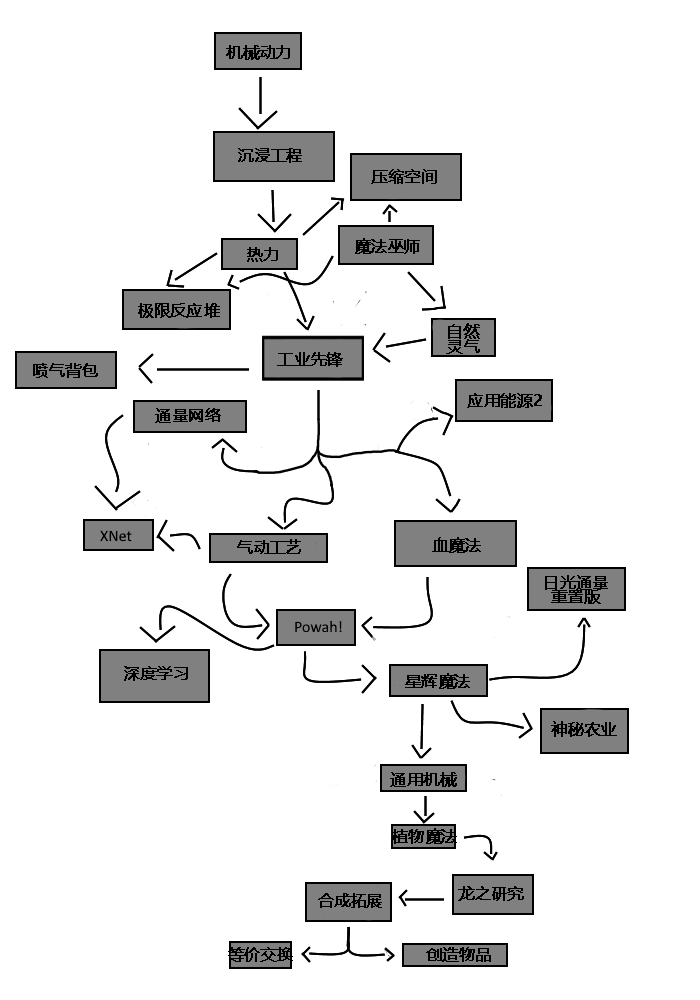
<style>
.page{position:relative;width:700px;height:1000px;background:#ffffff}
.page>*{position:absolute;margin:0}
.t1{font:16px "MicrosoftYaHei";color:#000000;font-weight:bold}
.t2{font:12px "MicrosoftYaHei";color:#000000;font-weight:bold}
.t3{font:12px/14.7px "MicrosoftYaHei";color:#000000;font-weight:bold}
</style>
<div class="page">
<p class="t1" style="left:226px;top:45px;width:64px;height:15px">机械动力</p>
<p class="t2" style="left:238px;top:148px;width:64px;height:15px">沉浸工程</p>
<p class="t2" style="left:371px;top:169px;width:66px;height:15px">压缩空间</p>
<p class="t2" style="left:355px;top:238px;width:65px;height:16px">魔法巫师</p>
<p class="t2" style="left:247px;top:247px;width:31px;height:15px">热力</p>
<p class="t2" style="left:138px;top:303px;width:82px;height:15px">极限反应堆</p>
<p class="t3" style="left:446px;top:323px;width:34px;height:31px;text-align:center">自然<br>灵气</p>
<p class="t2" style="left:277px;top:352px;width:66px;height:15px">工业先锋</p>
<p class="t2" style="left:33px;top:363px;width:65px;height:15px">喷气背包</p>
<p class="t2" style="left:467px;top:393px;width:75px;height:15px">应用能源2</p>
<p class="t2" style="left:155px;top:408px;width:66px;height:15px">通量网络</p>
<p class="t2" style="left:237px;top:539px;width:64px;height:15px">气动工艺</p>
<p class="t2" style="left:432px;top:537px;width:49px;height:16px">血魔法</p>
<p class="t3" style="left:545px;top:575px;width:63px;height:29px;text-align:center">日光通量<br>重置版</p>
<p class="t2" style="left:124px;top:666px;width:64px;height:15px">深度学习</p>
<p class="t2" style="left:405px;top:673px;width:65px;height:16px">星辉魔法</p>
<p class="t2" style="left:551px;top:721px;width:66px;height:16px">神秘农业</p>
<p class="t2" style="left:390px;top:772px;width:67px;height:15px">通用机械</p>
<p class="t2" style="left:392px;top:828px;width:65px;height:16px">植物魔法</p>
<p class="t2" style="left:318px;top:893px;width:64px;height:15px">合成拓展</p>
<p class="t2" style="left:458px;top:886px;width:66px;height:15px">龙之研究</p>
<p class="t2" style="left:228px;top:947px;width:65px;height:15px">等价交换</p>
<p class="t2" style="left:426px;top:947px;width:65px;height:15px">创造物品</p>
</div>
